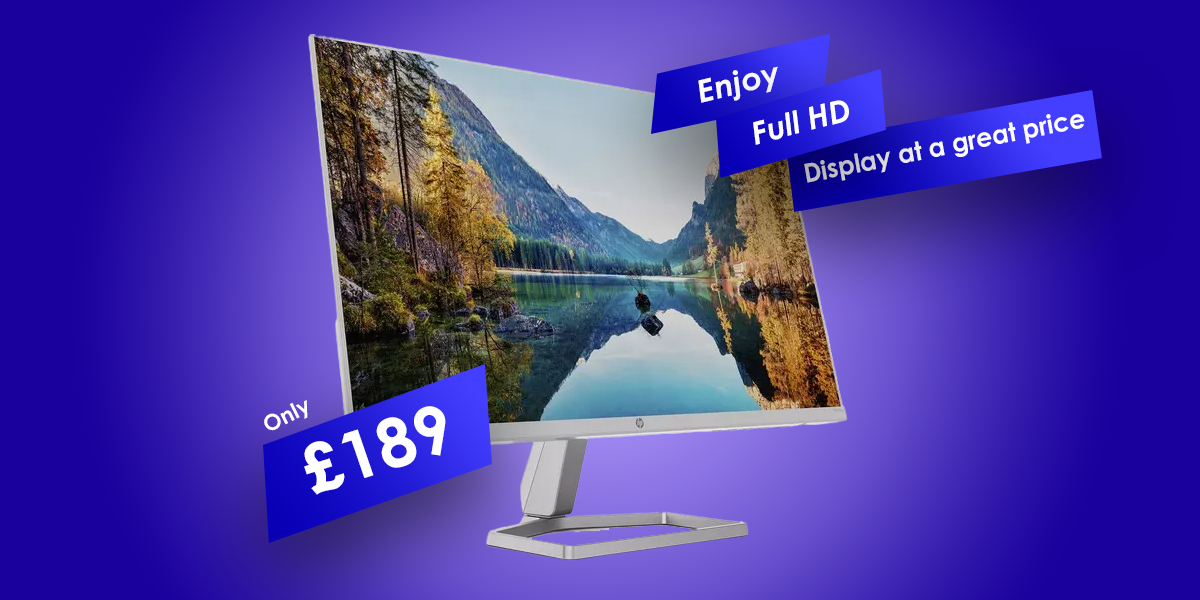
<style>
.page{position:relative;width:1200px;height:600px}
.page>*{position:absolute;margin:0}
.t1{font:31.2px "CenturyGothic-BoldItalic";color:#ffffff;scale:1.03 1}
.t2{font:31.3px "CenturyGothic-BoldItalic";color:#ffffff}
.t3{font:26px "CenturyGothic-Bold";color:#ffffff}
.t4{font:21.9px "CenturyGothic-Bold";color:#ffffff}
.t5{font:67.3px "CenturyGothic-Bold";color:#ffffff}
</style>
<div class="page">
<p class="t1" style="left:698px;top:66px;width:80px;height:37px;rotate:-14deg">Enjoy</p>
<p class="t2" style="left:753px;top:100px;width:96px;height:45px;rotate:-14deg">Full HD</p>
<p class="t3" style="left:804px;top:114px;width:281px;height:69px;rotate:-11deg">Display at a great price</p>
<p class="t4" style="left:264px;top:400px;width:44px;height:31px;rotate:-27deg">Only</p>
<p class="t5" style="left:304px;top:406px;width:142px;height:89px;rotate:-18deg">£189</p>
</div>
